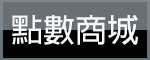
<style>
.page{position:relative;width:150px;height:60px;background:#686f75}
.page>*{position:absolute;margin:0}
.t1{font:32px "AdobeFanHeitiStd-Bold";color:#f7f7f7}
</style>
<div class="page">
<p class="t1" style="left:12px;top:14px;width:126px;height:31px">點數商城</p>
</div>
